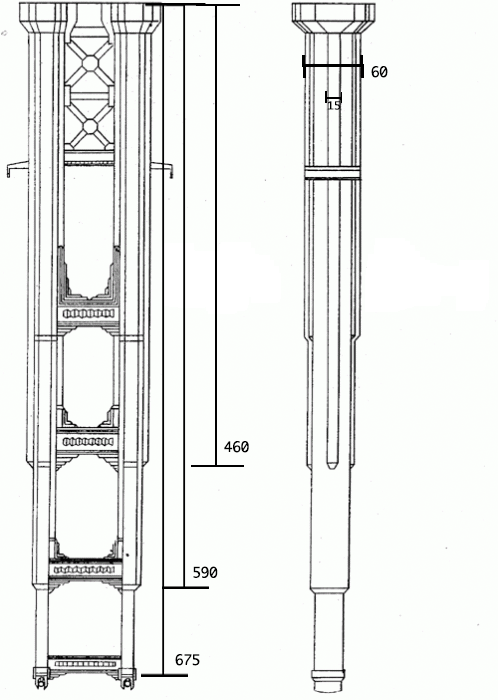
<style>
.page{position:relative;width:498px;height:700px;background:#fcfefc}
.page>*{position:absolute;margin:0}
.t1{font:14px "Monaco";color:#000000}
.t2{font:10.8px "Monaco";color:#000000;scale:1.08 1}
</style>
<div class="page">
<p class="t1" style="left:371px;top:66px;width:17px;height:12px">60</p>
<p class="t2" style="left:328px;top:101px;width:13px;height:9px">15</p>
<p class="t1" style="left:224px;top:441px;width:25px;height:12px">460</p>
<p class="t1" style="left:193px;top:566px;width:25px;height:12px">590</p>
<p class="t1" style="left:175px;top:654px;width:25px;height:12px">675</p>
</div>
